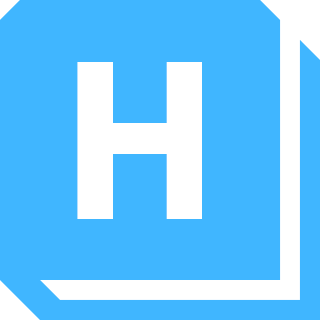
<style>
.page{position:relative;width:320px;height:320px;background:#40b6ff}
.page>*{position:absolute;margin:0}
.t1{font:240px "SourceSansPro-Bold";color:#ffffff}
</style>
<div class="page">
<p class="t1" style="left:77px;top:62px;width:125px;height:157px">H</p>
</div>
